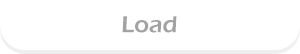
<style>
.page{position:relative;width:300px;height:54px;background:#ffffff}
.page>*{position:absolute;margin:0}
.t1{font:24px "ErasITC-Demi";color:#a2a2a2}
</style>
<div class="page">
<p class="t1" style="left:122px;top:16px;width:55px;height:17px">Load</p>
</div>
